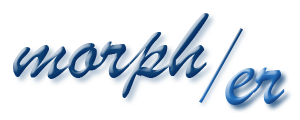
<style>
.page{position:relative;width:300px;height:120px;background:#ffffff}
.page>*{position:absolute;margin:0}
.t1{font:100px "BrushScriptMT";color:#104376}
.t2{font:100px "BrushScriptMT";color:#2771bb}
</style>
<div class="page">
<p class="t1" style="left:13px;top:13px;width:196px;height:85px">morph</p>
<p class="t2" style="left:225px;top:67px;width:60px;height:38px">er</p>
</div>
